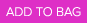
<style>
.page{position:relative;width:87px;height:23px;background:#de2fc6}
.page>*{position:absolute;margin:0}
.t1{font:13px "ProximaNova-Light";color:#ffffff}
</style>
<div class="page">
<p class="t1" style="left:6px;top:7px;width:75px;height:10px">ADD TO BAG</p>
</div>
